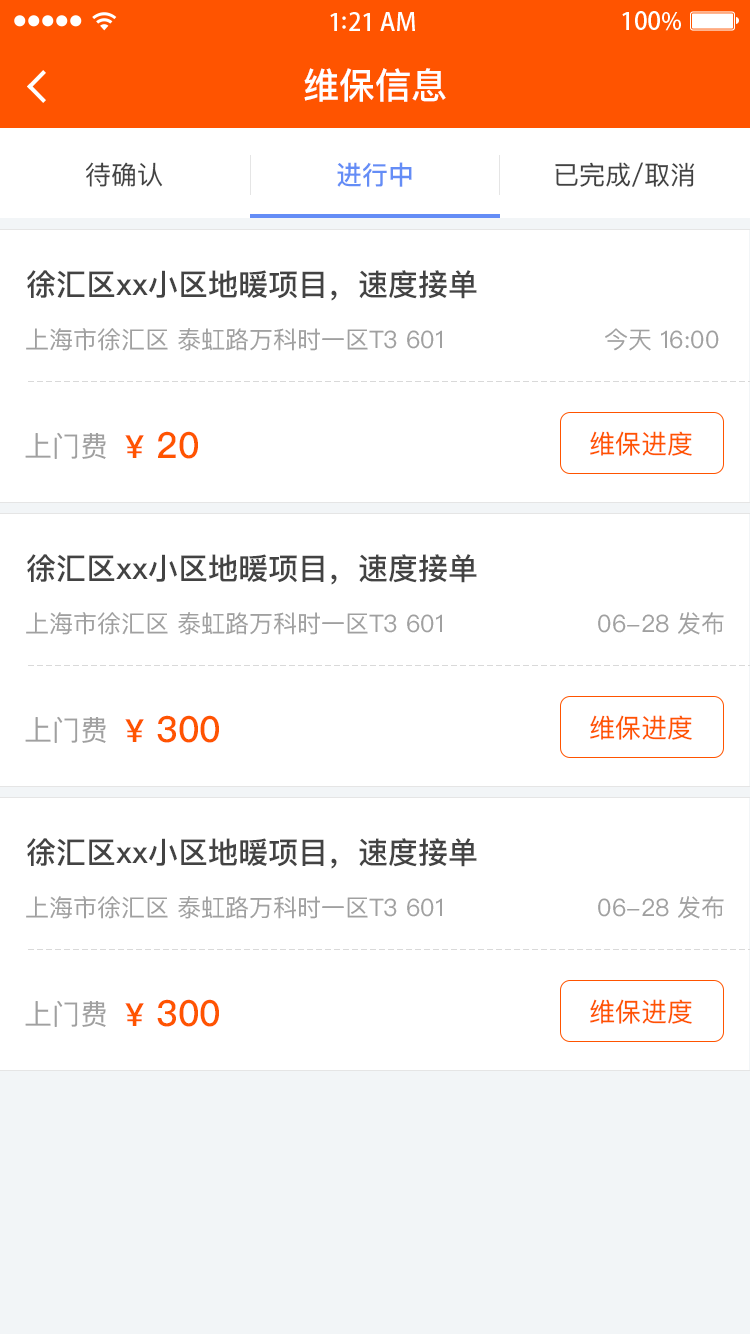
<style>
.page{position:relative;width:750px;height:1334px;background:#ffffff}
.page>*{position:absolute;margin:0}
.t1{font:36px "PingFangSC-Medium";color:#ffffff}
.t2{font:26px "PingFangSC-Regular";color:#434343}
.t3{font:26px "PingFangSC-Medium";color:#648df6}
.t4{font:30px "PingFangSC-Medium";color:#434343}
.t5{font:24px "PingFangSC-Regular";color:#a0a0a0}
.t6{font:28px "PingFangSC-Regular";color:#a0a0a0}
.t7{font:36px "PingFangSC-Medium";color:#ff5400}
.t8{font:32px "PingFangSC-Medium";color:#ff5400}
.t9{font:26px "PingFangSC-Regular";color:#ff5400}
</style>
<div class="page">
<p class="t1" style="left:304px;top:68px;width:142px;height:34px">维保信息</p>
<p class="t2" style="left:86px;top:162px;width:77px;height:25px">待确认</p>
<p class="t3" style="left:337px;top:162px;width:75px;height:25px">进行中</p>
<p class="t2" style="left:555px;top:162px;width:140px;height:25px">已完成/取消</p>
<p class="t4" style="left:27px;top:270px;width:450px;height:31px">徐汇区xx小区地暖项目，速度接单</p>
<p class="t5" style="left:26px;top:328px;width:416px;height:23px">上海市徐汇区 泰虹路万科时一区T3 601</p>
<p class="t5" style="left:605px;top:328px;width:114px;height:23px">今天 16:00</p>
<p class="t6" style="left:25px;top:432px;width:81px;height:27px">上门费</p>
<p class="t7" style="left:125px;top:431px;width:73px;height:28px"><span class="t8">¥</span> 20</p>
<p class="t9" style="left:590px;top:431px;width:102px;height:25px">维保进度</p>
<p class="t4" style="left:27px;top:554px;width:450px;height:31px">徐汇区xx小区地暖项目，速度接单</p>
<p class="t5" style="left:26px;top:612px;width:416px;height:23px">上海市徐汇区 泰虹路万科时一区T3 601</p>
<p class="t5" style="left:598px;top:612px;width:126px;height:23px">06-28 发布</p>
<p class="t6" style="left:25px;top:716px;width:81px;height:27px">上门费</p>
<p class="t7" style="left:125px;top:715px;width:94px;height:28px"><span class="t8">¥</span> 300</p>
<p class="t9" style="left:590px;top:715px;width:102px;height:25px">维保进度</p>
<p class="t4" style="left:27px;top:838px;width:450px;height:31px">徐汇区xx小区地暖项目，速度接单</p>
<p class="t5" style="left:26px;top:896px;width:416px;height:23px">上海市徐汇区 泰虹路万科时一区T3 601</p>
<p class="t5" style="left:598px;top:896px;width:126px;height:23px">06-28 发布</p>
<p class="t6" style="left:25px;top:1000px;width:81px;height:27px">上门费</p>
<p class="t7" style="left:125px;top:999px;width:94px;height:28px"><span class="t8">¥</span> 300</p>
<p class="t9" style="left:590px;top:999px;width:102px;height:25px">维保进度</p>
</div>
